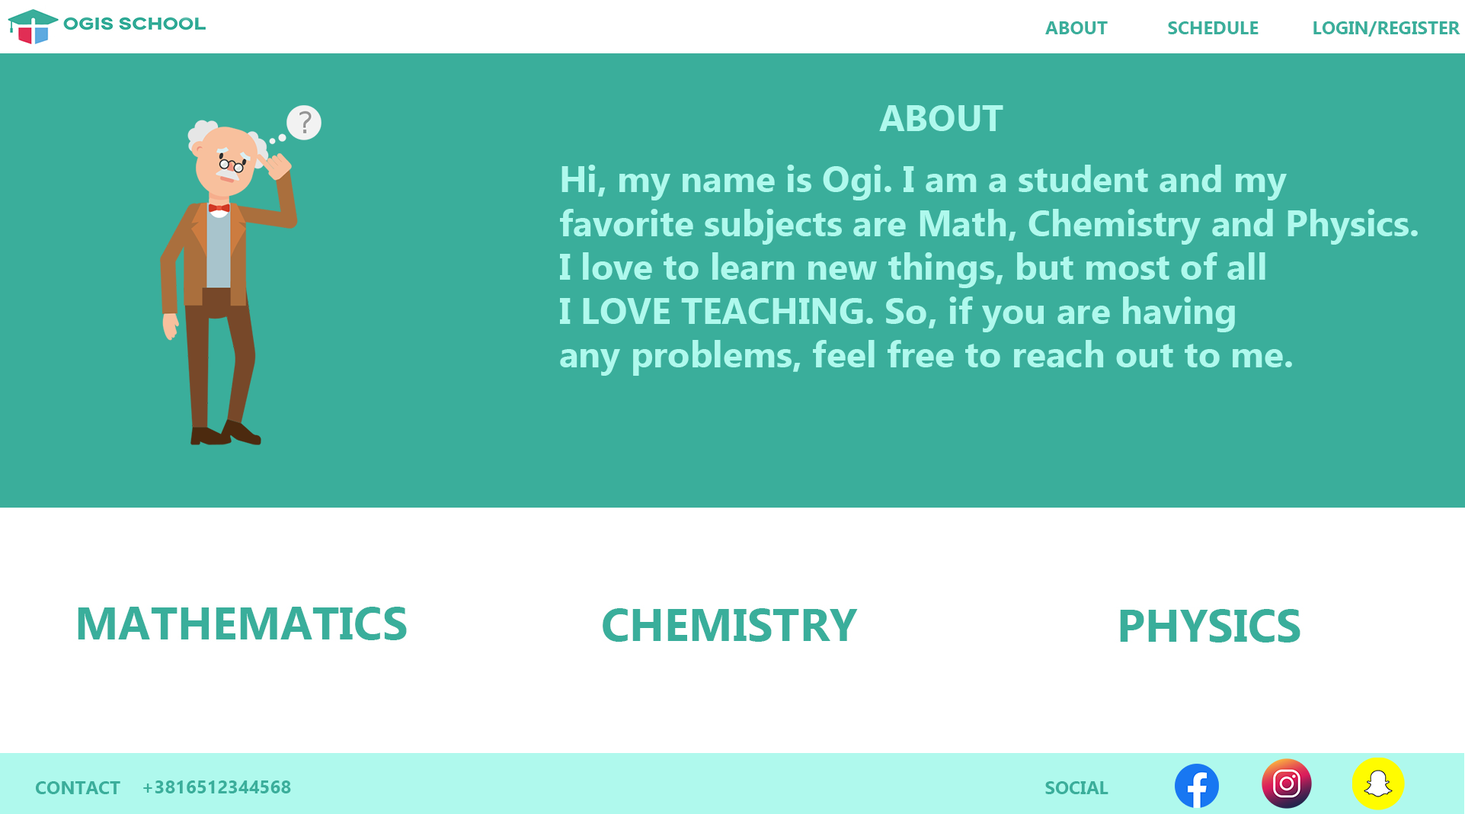
<style>
.page{position:relative;width:1465px;height:814px;background:#3aae9b}
.page>*{position:absolute;margin:0}
.t1{font:18.3px "Ebrima-Bold";color:#3aae9b}
.t2{font:36.6px "Ebrima-Bold";color:#aff9ed}
</style>
<div class="page">
<p class="t1" style="left:1045px;top:21px;width:63px;height:13px">ABOUT</p>
<p class="t1" style="left:1168px;top:21px;width:91px;height:13px">SCHEDULE</p>
<p class="t1" style="left:1314px;top:21px;width:147px;height:16px">LOGIN/REGISTER</p>
<p class="t2" style="left:879px;top:105px;width:125px;height:26px">ABOUT</p>
<p class="t2" style="left:560px;top:165px;width:858px;height:211px">Hi, my name is Ogi. I am a student and my <br>favorite subjects are Math, Chemistry and Physics.<br>I love to learn new things, but most of all<br>I LOVE TEACHING. So, if you are having<br>any problems, feel free to reach out to me.</p>
<p class="t1" style="left:36px;top:781px;width:84px;height:13px">CONTACT</p>
<p class="t1" style="left:143px;top:780px;width:148px;height:13px">+3816512344568</p>
<p class="t1" style="left:1045px;top:781px;width:64px;height:13px">SOCIAL</p>
</div>
